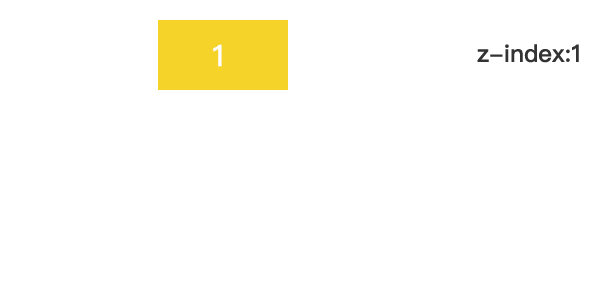
<style>
.page{position:relative;width:600px;height:297px;background:#ffffff}
.page>*{position:absolute;margin:0}
.t1{font:24px "PingFangSC-Medium";color:#333333}
</style>
<div class="page">
<p class="t1" style="left:477px;top:44px;width:102px;height:19px">z-index:1</p>
</div>
